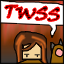
<style>
.page{position:relative;width:64px;height:64px}
.page>*{position:absolute;margin:0}
.t1{font:18px "VinerHandITC"}
</style>
<div class="page">
<p class="t1" style="left:5px;top:5px;width:54px;height:16px;rotate:4deg">TWSS</p>
</div>
